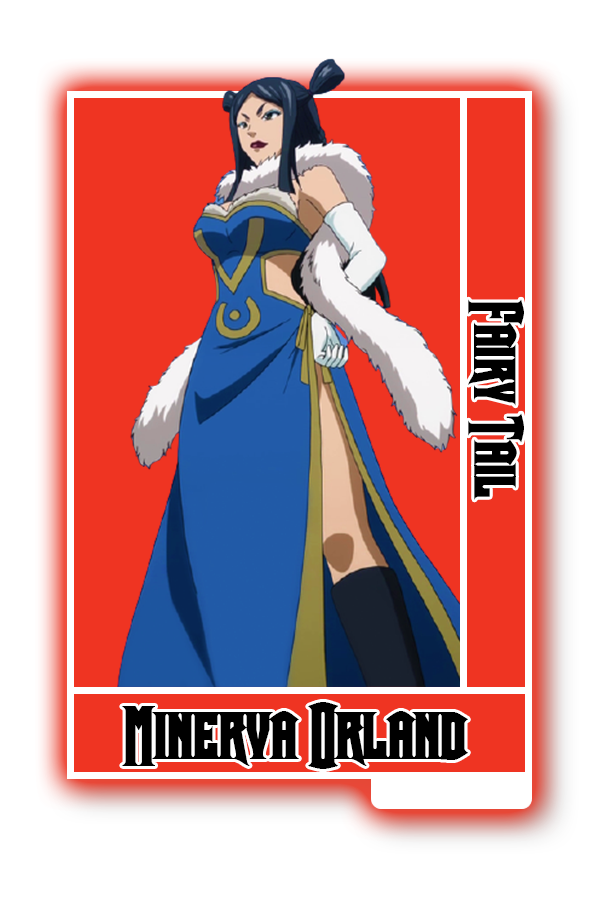
<style>
.page{position:relative;width:600px;height:900px;background:#ffffff}
.page>*{position:absolute;margin:0}
.t1{font:61.5px "Crown-Title";color:#000000}
.t2{font:70.1px "Crown-Title";color:#000000}
</style>
<div class="page">
<p class="t1" style="left:468px;top:299px;width:56px;height:201px;rotate:90deg">Fairy Tail</p>
<p class="t2" style="left:122px;top:702px;width:346px;height:67px">Minerva Orland</p>
</div>
